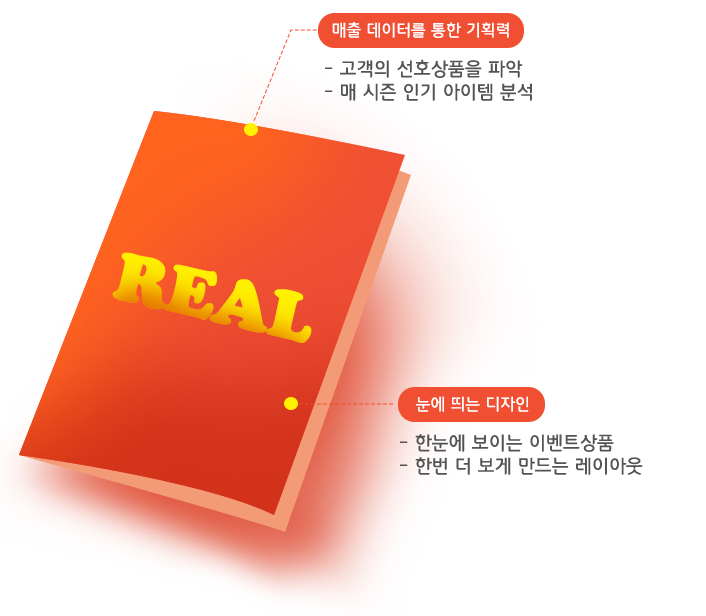
<style>
.page{position:relative;width:706px;height:616px;background:#ffffff}
.page>*{position:absolute;margin:0}
.t1{font:16.7px "12LotteMartDreamMedium";letter-spacing:0.01em;color:#ffffff}
.t2{font:19.2px "12LotteMartDreamMedium";letter-spacing:0.01em;color:#555454}
.t3{font:69.8px "CooperBlack";letter-spacing:-0.02em;font-weight:bold}
</style>
<div class="page">
<p class="t1" style="left:332px;top:22px;width:177px;height:16px">매출 데이터를 통한 기획력</p>
<p class="t2" style="left:325px;top:59px;width:198px;height:19px">- 고객의 선호상품을 파악</p>
<p class="t2" style="left:325px;top:83px;width:207px;height:18px">- 매 시즌 인기 아이템 분석</p>
<p class="t3" style="left:112px;top:252px;width:200px;height:91px;rotate:13deg">REAL</p>
<p class="t1" style="left:416px;top:396px;width:113px;height:16px">눈에 띄는 디자인</p>
<p class="t2" style="left:400px;top:434px;width:214px;height:18px">- 한눈에 보이는 이벤트상품</p>
<p class="t2" style="left:400px;top:457px;width:243px;height:18px">- 한번 더 보게 만드는 레이아웃</p>
</div>
